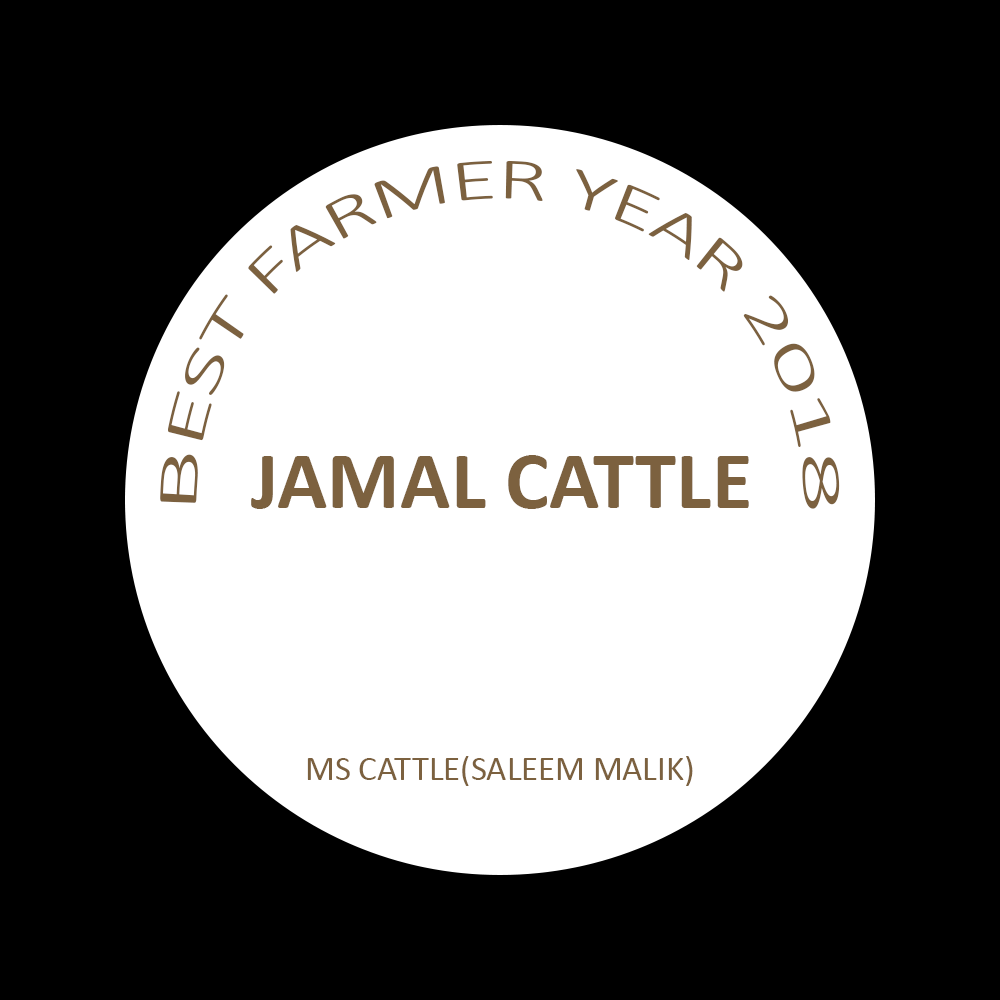
<style>
.page{position:relative;width:1000px;height:1000px;background:#000000}
.page>*{position:absolute;margin:0}
.t1{font:83.3px "Calibri-Bold";color:#7c613f}
.t2{font:34.7px "Calibri";color:#7c613f}
</style>
<div class="page">
<p class="t1" style="left:251px;top:455px;width:498px;height:54px">JAMAL CATTLE</p>
<p class="t2" style="left:307px;top:756px;width:386px;height:30px">MS CATTLE(SALEEM MALIK)</p>
</div>
